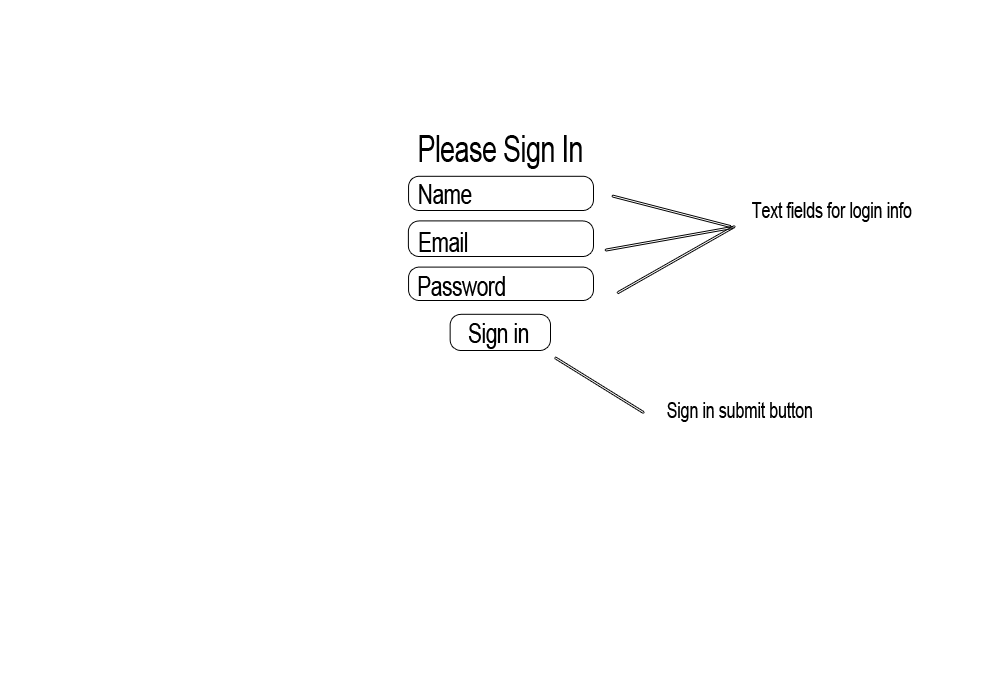
<style>
.page{position:relative;width:1000px;height:700px;background:#ffffff}
.page>*{position:absolute;margin:0}
.t1{font:36.5px "ArialMT";letter-spacing:-0.02em;color:#000000;scale:0.73 1}
.t2{font:28.4px "ArialMT";letter-spacing:-0.02em;color:#000000;scale:0.73 1}
.t3{font:22.3px "ArialMT";letter-spacing:-0.02em;color:#000000;scale:0.73 1}
</style>
<div class="page">
<p class="t1" style="left:419px;top:135px;width:163px;height:34px">Please Sign In</p>
<p class="t2" style="left:419px;top:184px;width:53px;height:20px">Name</p>
<p class="t3" style="left:752px;top:202px;width:160px;height:20px">Text fields for login info</p>
<p class="t2" style="left:419px;top:232px;width:49px;height:20px">Email</p>
<p class="t2" style="left:418px;top:276px;width:87px;height:20px">Password</p>
<p class="t2" style="left:468px;top:323px;width:61px;height:26px">Sign in</p>
<p class="t3" style="left:667px;top:402px;width:145px;height:20px">Sign in submit button</p>
</div>
